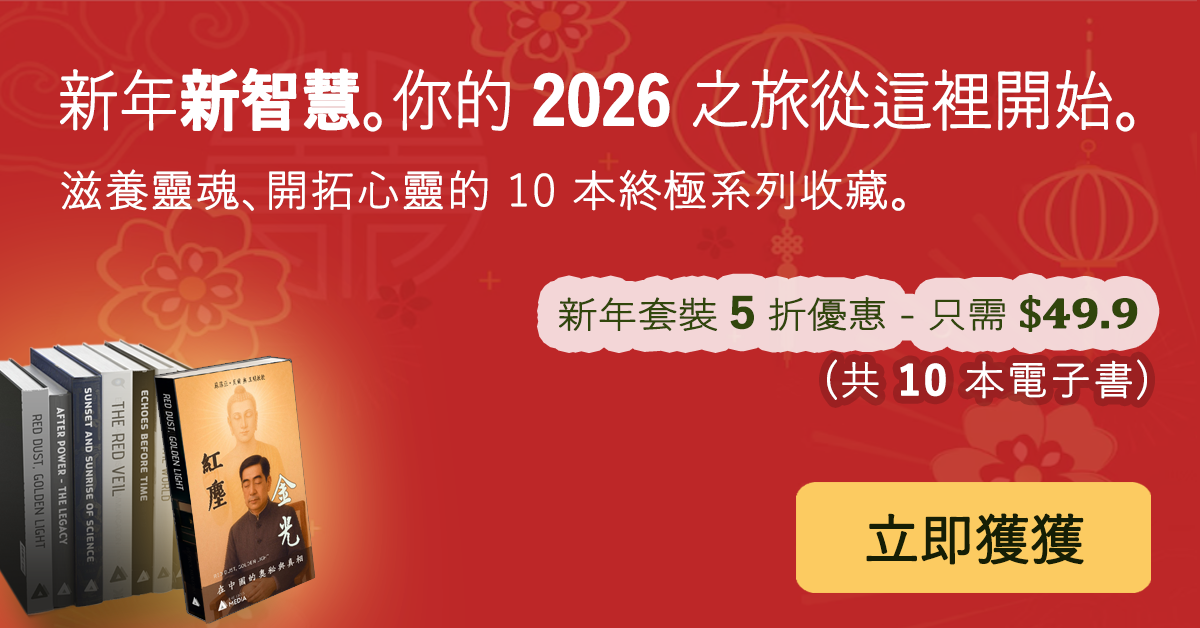
<style>
.page{position:relative;width:1200px;height:628px;background:#bd2728}
.page>*{position:absolute;margin:0}
.t1{font:66px "YuGothic-Light";letter-spacing:-0.025em;color:#ffffff;font-weight:bold;scale:0.92 1}
.t2{font:66px "YuGothic-Bold";letter-spacing:-0.025em;color:#ffffff;font-weight:bold;scale:0.92 1}
.t3{font:43.2px "YuGothic-Light";letter-spacing:0.025em;color:#ffffff;font-weight:bold}
.t4{font:36px "YuGothic-Light";letter-spacing:-0.025em;color:#31460c;font-weight:bold;scale:1.11 1}
.t5{font:41.4px "YuGothic-Bold";letter-spacing:-0.025em;color:#31460c;font-weight:bold;scale:1.11 1}
.t6{font:43.2px "Cambria";letter-spacing:-0.025em;color:#31460c;font-weight:bold;scale:1.11 1}
.t7{font:43.2px "Cambria-Bold";letter-spacing:-0.025em;color:#31460c;font-weight:bold;scale:1.11 1}
.t8{font:40px "YuGothic-Light";letter-spacing:0.05em;color:#ffffff;font-weight:bold}
.t9{font:40px "YuGothic-Bold";letter-spacing:0.05em;color:#ffffff;font-weight:bold}
.t10{font:55px "YuGothic-Medium";letter-spacing:-0.025em;color:#151e05;font-weight:bold}
</style>
<div class="page">
<p class="t1" style="left:60px;top:68px;width:1075px;height:64px">新年<span class="t2">新智慧</span>。你的 <span class="t2">2026</span> 之旅從這裡開始。</p>
<p class="t3" style="left:61px;top:169px;width:844px;height:42px">滋養靈魂、開拓心靈的 10 本終極系列收藏。</p>
<p class="t4" style="left:559px;top:295px;width:579px;height:37px">新年套裝 <span class="t5">5</span> 折優惠 - 只需<span class="t6"> $</span><span class="t7">49.9</span></p>
<p class="t8" style="left:827px;top:359px;width:320px;height:41px">(共 <span class="t9">10</span> 本電子書)</p>
<p class="t10" style="left:866px;top:513px;width:218px;height:52px">立即獲獲</p>
</div>
